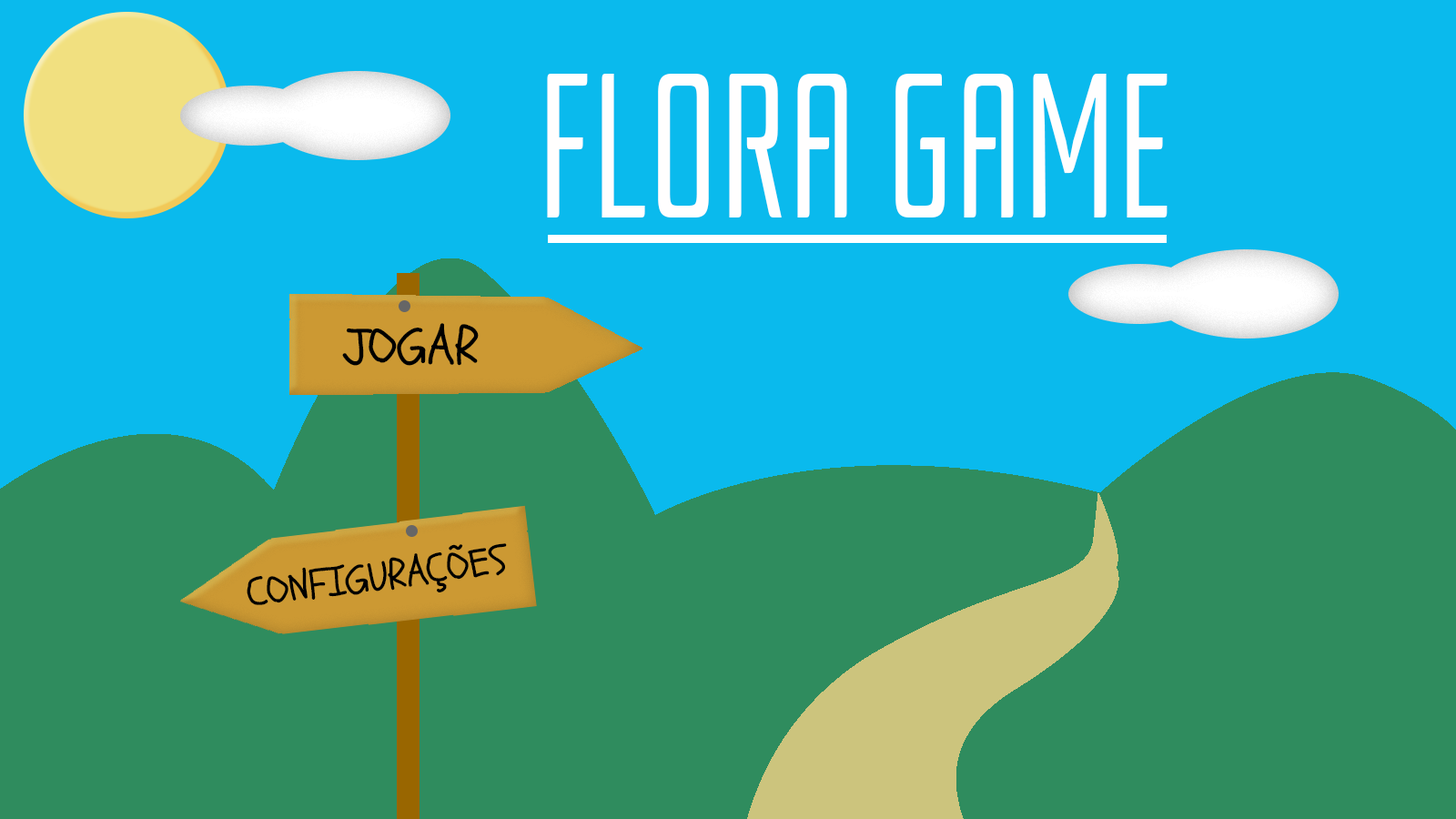
<style>
.page{position:relative;width:1456px;height:819px;background:#0abaed}
.page>*{position:absolute;margin:0}
.t1{font:205.2px "Rationale-Regular";color:#fffefe;scale:0.71 1}
.t2{font:51.9px "Schoolbell-Regular";color:#000000}
.t3{font:40.9px "Schoolbell-Regular";color:#000000}
</style>
<div class="page">
<p class="t1" style="left:547px;top:74px;width:621px;height:143px">FLORA GAME</p>
<p class="t2" style="left:342px;top:323px;width:137px;height:43px">JOGAR</p>
<p class="t3" style="left:247px;top:543px;width:260px;height:62px;rotate:-7deg">CONFIGURAÇÕES</p>
</div>
